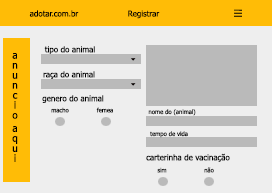
<style>
.page{position:relative;width:272px;height:193px;background:#eeeeee}
.page>*{position:absolute;margin:0}
.t1{font:8px "Tahoma";color:#000000}
.t2{font:10px "Tahoma";color:#000000}
.t3{font:6px "Tahoma";color:#1f1f1f}
.t4{font:6px "Tahoma";color:#000000}
.t5{font:6px "Tahoma"}
</style>
<div class="page">
<p class="t1" style="left:29px;top:10px;width:50px;height:7px">adotar.com.br</p>
<p class="t1" style="left:128px;top:10px;width:32px;height:9px">Registrar</p>
<p class="t2" style="left:12px;top:53px;width:6px;height:109px">anuncio aqui</p>
<p class="t1" style="left:44px;top:46px;width:51px;height:8px">tipo do animal</p>
<p class="t1" style="left:43px;top:71px;width:52px;height:8px">raça do animal</p>
<p class="t1" style="left:42px;top:95px;width:62px;height:8px">genero do animal</p>
<p class="t3" style="left:51px;top:107px;width:18px;height:6px">macho</p>
<p class="t4" style="left:96px;top:107px;width:17px;height:6px">femea</p>
<p class="t3" style="left:148px;top:109px;width:48px;height:7px">nome do (animal)</p>
<p class="t4" style="left:150px;top:131px;width:38px;height:7px">tempo de vida</p>
<p class="t1" style="left:146px;top:153px;width:84px;height:9px">carterinha de vacinação</p>
<p class="t3" style="left:157px;top:167px;width:10px;height:6px">sim</p>
<p class="t5" style="left:204px;top:167px;width:10px;height:6px">não</p>
</div>
